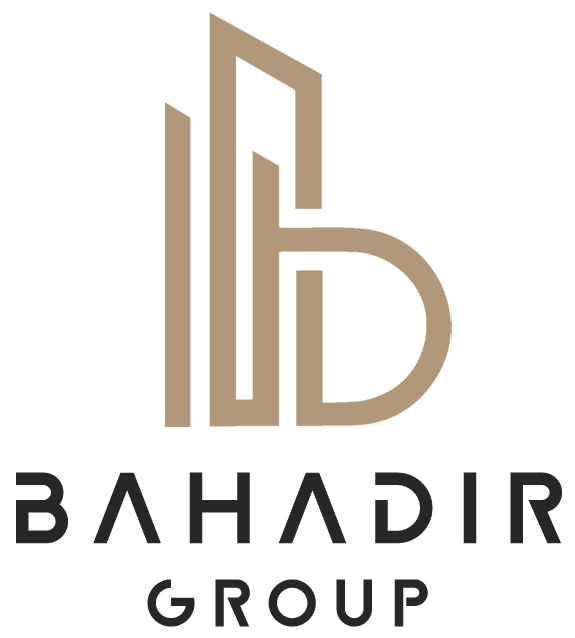
<style>
.page{position:relative;width:575px;height:638px;background:#ffffff}
.page>*{position:absolute;margin:0}
.t1{font:75px/83.3px "digitalgeometric-Bold";letter-spacing:0.3em;color:#272727}
.t2{font:50px/83.3px "digitalgeometric-Bold";letter-spacing:0.3em;color:#272727}
</style>
<div class="page">
<p class="t1" style="left:16px;top:472px;width:546px;height:155px;text-align:center">BAHADIR<br><span class="t2">GR0UP</span></p>
</div>
